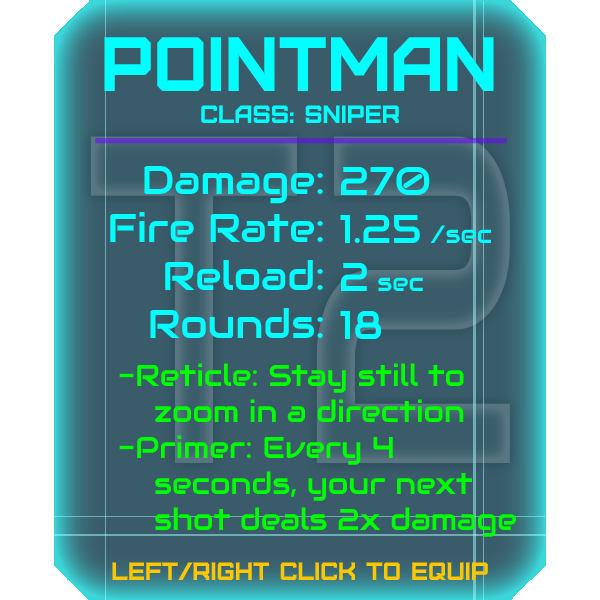
<style>
.page{position:relative;width:600px;height:600px;background:#3a5c6a}
.page>*{position:absolute;margin:0}
.t1{font:76.8px "Furore";color:#00ffff;scale:0.96 1}
.t2{font:25px "Furore";color:#00ffff}
.t3{font:40px "Audiowide-Regular";color:#00ffff}
.t4{font:25px "Audiowide-Regular";color:#00ffff}
.t5{font:30px "Audiowide-Regular";color:#00ff00}
.t6{font:40px "Audiowide-Regular";color:#00ff00}
.t7{font:25px "Furore";color:#ffc700}
</style>
<div class="page">
<p class="t1" style="left:104px;top:37px;width:390px;height:54px">pointman</p>
<p class="t2" style="left:201px;top:105px;width:198px;height:18px">Class: sniper</p>
<p class="t3" style="left:110px;top:165px;width:213px;height:173px;text-align:right">Damage:<br>Fire Rate:<br>Reload:<br>Rounds:</p>
<p class="t3" style="left:340px;top:166px;width:152px;height:173px">270<br>1.25 <span class="t4">/sec<br></span>2 <span class="t4">sec<br></span>18</p>
<p class="t5" style="left:119px;top:363px;width:398px;height:174px"><span class="t6"><br><br><br><br><br></span>-Reticle: Stay still to<br> zoom in a direction<br>-Primer: Every 4<br> seconds, your next<br> shot deals 2x damage</p>
<p class="t7" style="left:112px;top:562px;width:376px;height:18px">left/right click to equip</p>
</div>
